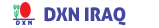
<style>
.page{position:relative;width:159px;height:28px;background:#ffffff}
.page>*{position:absolute;margin:0}
.t1{font:32px "AllerDisplay";color:#44489f}
</style>
<div class="page">
<p class="t1" style="left:44px;top:7px;width:82px;height:19px">DXN IRAQ</p>
</div>
